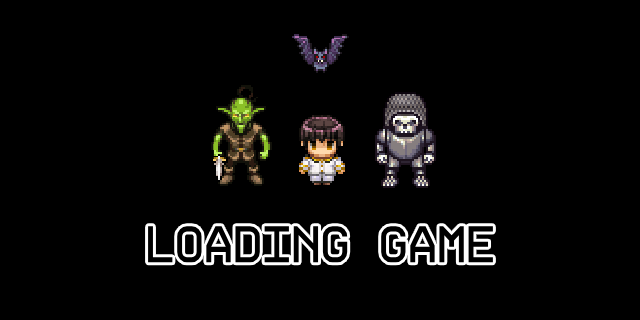
<style>
.page{position:relative;width:640px;height:320px;background:#000000}
.page>*{position:absolute;margin:0}
.t1{font:61.7px "ProFontWindows";color:#000000;scale:0.94 1}
</style>
<div class="page">
<p class="t1" style="left:148px;top:226px;width:345px;height:37px">LOADING GAME</p>
</div>
